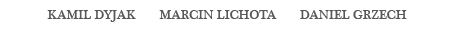
<style>
.page{position:relative;width:454px;height:30px;background:#ffffff}
.page>*{position:absolute;margin:0}
.t1{font:13px "PlantagenetCherokee";color:#595757}
</style>
<div class="page">
<p class="t1" style="left:47px;top:10px;width:360px;height:12px">KAMIL DYJAK       MARCIN LICHOTA       DANIEL GRZECH</p>
</div>
